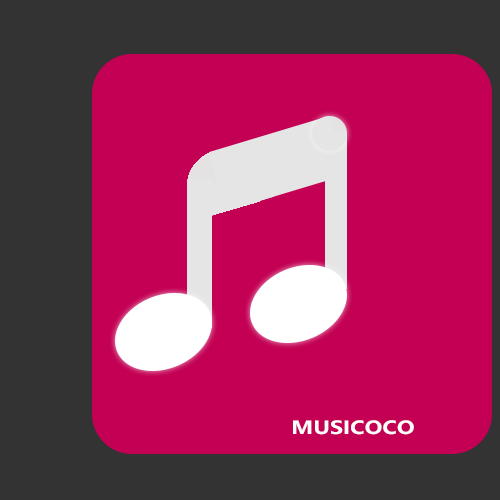
<style>
.page{position:relative;width:500px;height:500px;background:#c30053}
.page>*{position:absolute;margin:0}
.t1{font:18px "MicrosoftYaHei-Bold";color:#fffefe;scale:1.2 1}
</style>
<div class="page">
<p class="t1" style="left:293px;top:420px;width:121px;height:15px">MUSICOCO</p>
</div>
